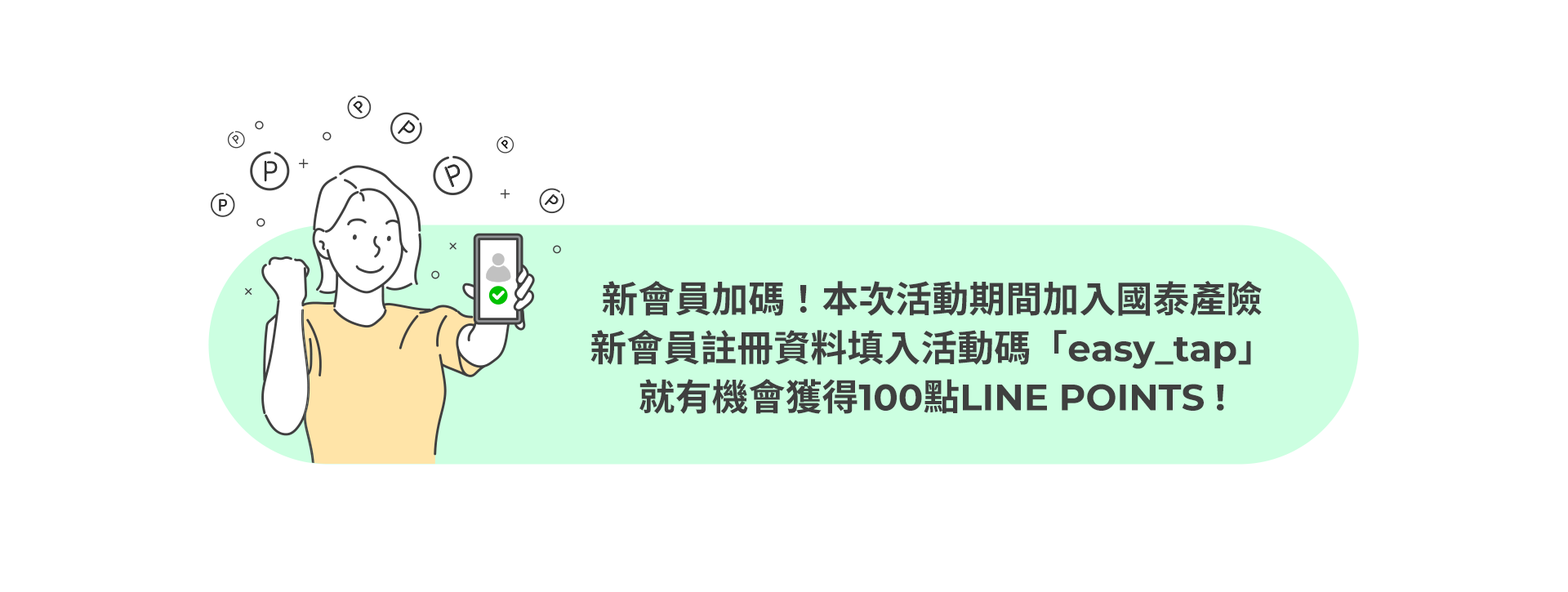
<style>
.page{position:relative;width:1568px;height:592px;background:#ffffff}
.page>*{position:absolute;margin:0}
.t1{font:36.8px/49px "SourceHanSansTC-Bold";color:#3f3f3f}
.t2{font:36.8px/49px "Montserrat-Bold";color:#3f3f3f}
</style>
<div class="page">
<p class="t1" style="left:590px;top:281px;width:672px;height:133px;text-align:center">新會員加碼！本次活動期間加入國泰產險<br>新會員註冊資料填入活動碼「<span class="t2">easy_tap</span>」<br>就有機會獲得<span class="t2">100</span>點<span class="t2">LINE POINTS !</span></p>
</div>
